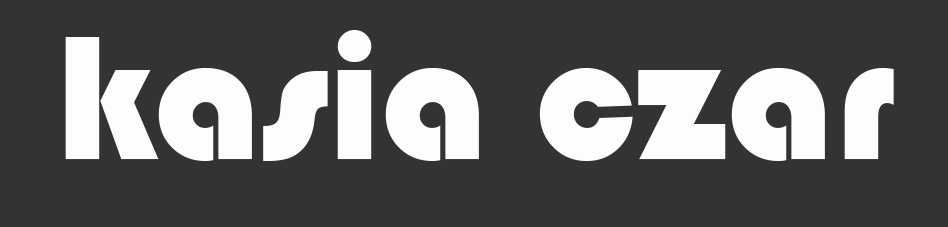
<style>
.page{position:relative;width:948px;height:227px;background:#333333}
.page>*{position:absolute;margin:0}
.t1{font:182.9px "Bauhaus93";color:#fefcfc}
</style>
<div class="page">
<p class="t1" style="left:65px;top:30px;width:829px;height:131px">kasia czar</p>
</div>
